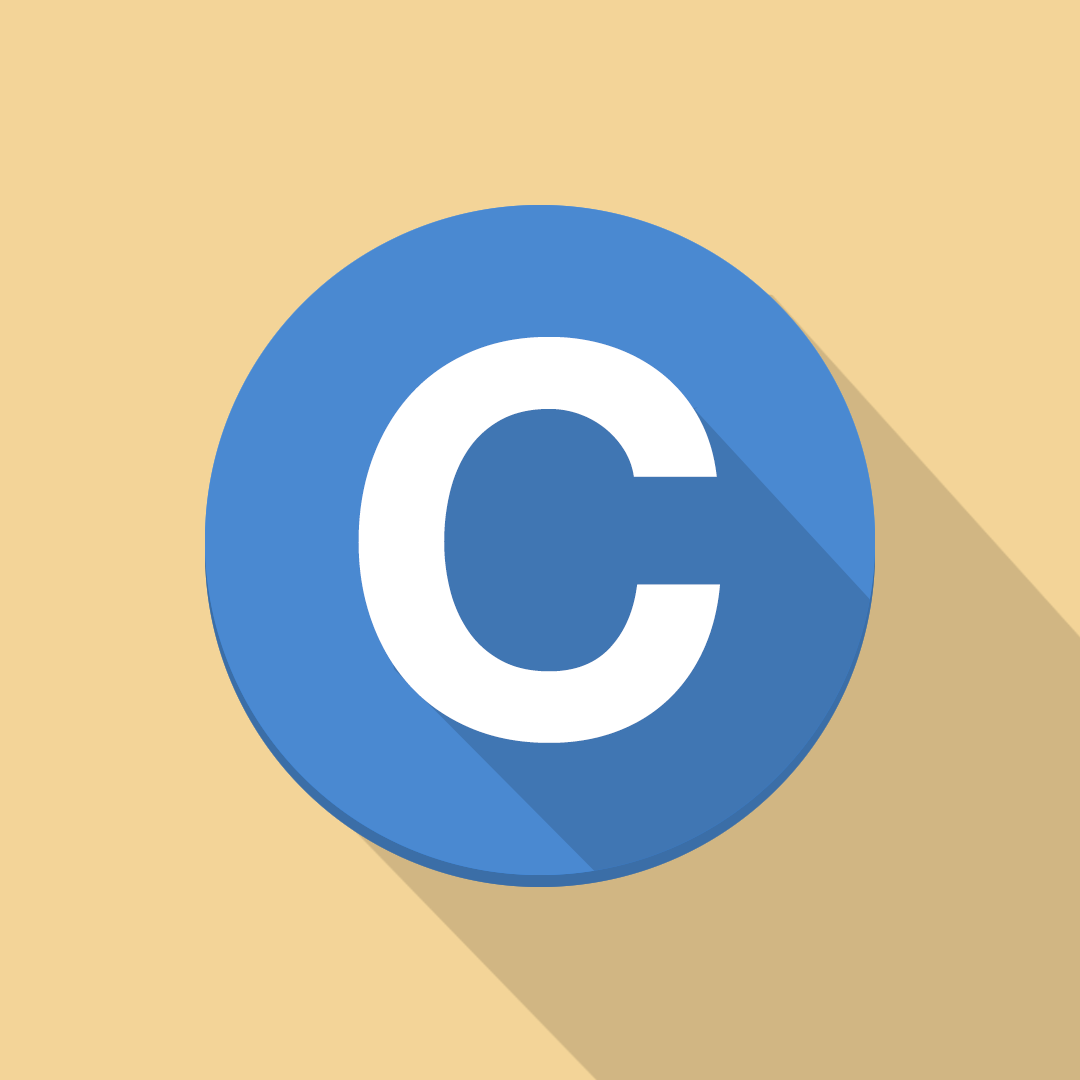
<style>
.page{position:relative;width:1080px;height:1080px;background:#f3d498}
.page>*{position:absolute;margin:0}
.t1{font:543.1px "HelveticaNeue-Bold";color:#ffffff}
</style>
<div class="page">
<p class="t1" style="left:358px;top:337px;width:362px;height:406px">C</p>
</div>
